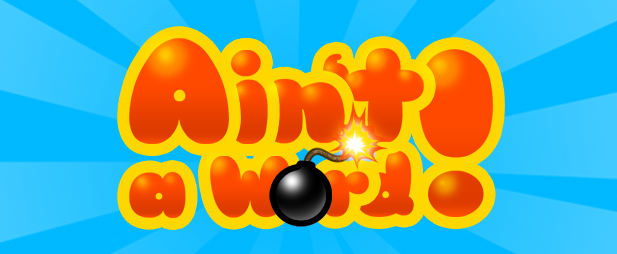
<style>
.page{position:relative;width:617px;height:254px}
.page>*{position:absolute;margin:0}
.t1{font:146.4px "Sniglet"}
.t2{font:122px "Sniglet";letter-spacing:-0.1em}
.t3{font:213.5px "Sniglet";letter-spacing:-0.1em}
.t4{font:85.4px "Sniglet";letter-spacing:-0.1em}
</style>
<div class="page">
<p class="t1" style="left:129px;top:38px;width:100px;height:106px">A</p>
<p class="t2" style="left:228px;top:50px;width:117px;height:94px">in</p>
<p class="t2" style="left:228px;top:50px;width:40px;height:94px">i</p>
<p class="t2" style="left:323px;top:48px;width:101px;height:94px">‘t</p>
<p class="t3" style="left:419px;top:49px;width:74px;height:168px">!</p>
<p class="t4" style="left:129px;top:156px;width:161px;height:62px">a W</p>
<p class="t4" style="left:355px;top:151px;width:59px;height:66px">d</p>
<p class="t4" style="left:321px;top:170px;width:48px;height:47px">r</p>
</div>
